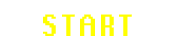
<style>
.page{position:relative;width:175px;height:50px;background:#ffffff}
.page>*{position:absolute;margin:0}
.t1{font:34.3px "RuneScape-UF";letter-spacing:0.1em;color:#ffff00}
</style>
<div class="page">
<p class="t1" style="left:43px;top:14px;width:89px;height:22px">START</p>
</div>
